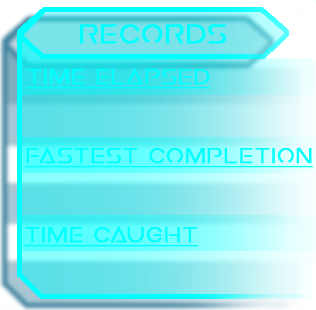
<style>
.page{position:relative;width:316px;height:310px}
.page>*{position:absolute;margin:0}
.t1{font:30px "EarthOrbiter";color:#00ffff;font-weight:bold}
.t2{font:24px "EarthOrbiter";color:#00ffff;font-weight:bold;text-decoration:underline}
</style>
<div class="page">
<p class="t1" style="left:80px;top:24px;width:146px;height:20px">records</p>
<p class="t2" style="left:26px;top:68px;width:185px;height:21px">time elapsed</p>
<p class="t2" style="left:25px;top:147px;width:288px;height:21px">fastest completion</p>
<p class="t2" style="left:24px;top:226px;width:174px;height:21px">time caught</p>
</div>
